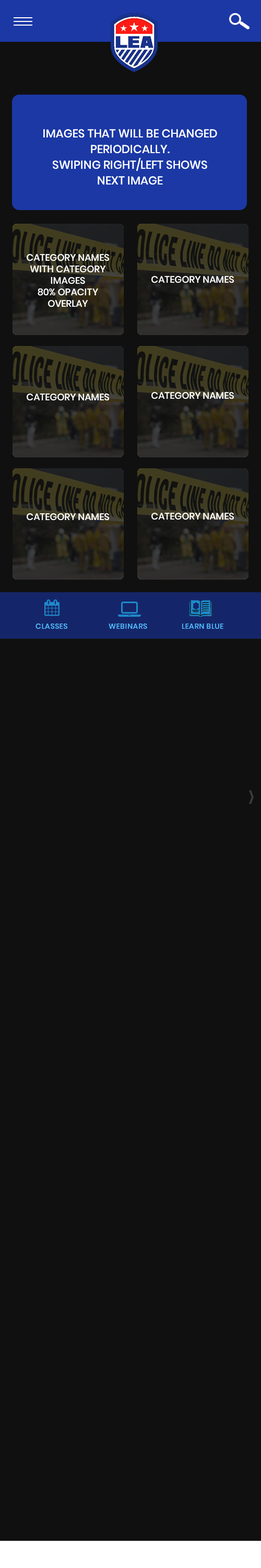
<style>
.page{position:relative;width:261px;height:1568px;background:#101010}
.page>*{position:absolute;margin:0}
.t1{font:11.5px/15.7px "Poppins-Medium";color:#ffffff;text-transform:uppercase}
.t2{font:9.4px/11.5px "Poppins-Medium";color:#ffffff;text-transform:uppercase}
.t3{font:9.4px "Poppins-Medium";color:#ffffff;text-transform:uppercase}
.t4{font:7.3px "Poppins-Medium";letter-spacing:0.04em;color:#53bdff;text-transform:uppercase}
</style>
<div class="page">
<p class="t1" style="left:43px;top:129px;width:174px;height:56px;text-align:center">ImageS that will be changed periodically.<br>swiping right/left shows next image</p>
<p class="t2" style="left:27px;top:254px;width:82px;height:53px;text-align:center">CATEGORY NAMES WITH CATEGORY IMAGES<br>80% OPACITY OVERLAY</p>
<p class="t3" style="left:152px;top:276px;width:82px;height:7px">CATEGORY NAMES</p>
<p class="t3" style="left:27px;top:394px;width:82px;height:7px">CATEGORY NAMES</p>
<p class="t3" style="left:152px;top:392px;width:82px;height:7px">CATEGORY NAMES</p>
<p class="t3" style="left:27px;top:513px;width:82px;height:8px">CATEGORY NAMES</p>
<p class="t3" style="left:152px;top:513px;width:82px;height:7px">CATEGORY NAMES</p>
<p class="t4" style="left:36px;top:624px;width:31px;height:5px">classes</p>
<p class="t4" style="left:109px;top:624px;width:38px;height:5px">webinars</p>
<p class="t4" style="left:182px;top:624px;width:42px;height:5px">learn blue</p>
</div>
